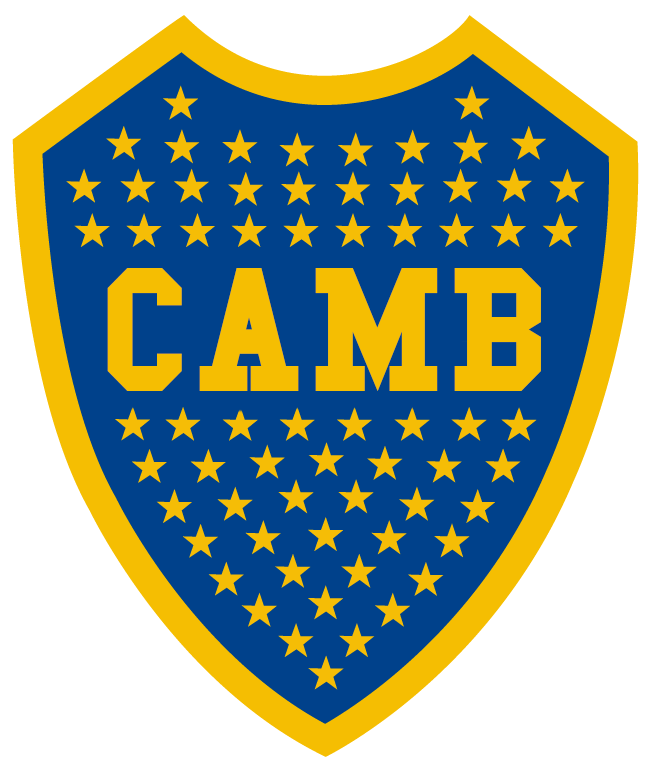
<style>
.page{position:relative;width:651px;height:772px;background:#00418b}
.page>*{position:absolute;margin:0}
.t1{font:180px "CollegeBold";color:#f5be02}
</style>
<div class="page">
<p class="t1" style="left:107px;top:268px;width:434px;height:123px">CAMB</p>
</div>
